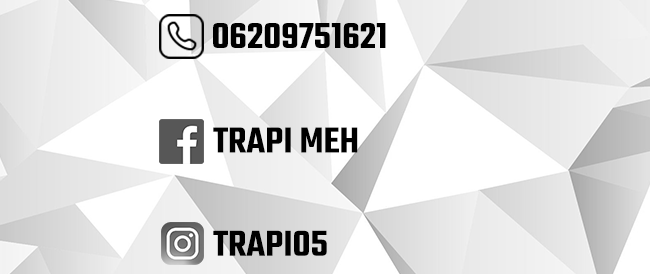
<style>
.page{position:relative;width:650px;height:274px;background:#ffffff}
.page>*{position:absolute;margin:0}
.t1{font:39.2px "Teko-SemiBold";color:#000000;text-transform:uppercase}
</style>
<div class="page">
<p class="t1" style="left:213px;top:23px;width:173px;height:25px">06209751621</p>
<p class="t1" style="left:213px;top:127px;width:145px;height:26px">Trapi meh</p>
<p class="t1" style="left:213px;top:230px;width:114px;height:26px">trapi05</p>
</div>
